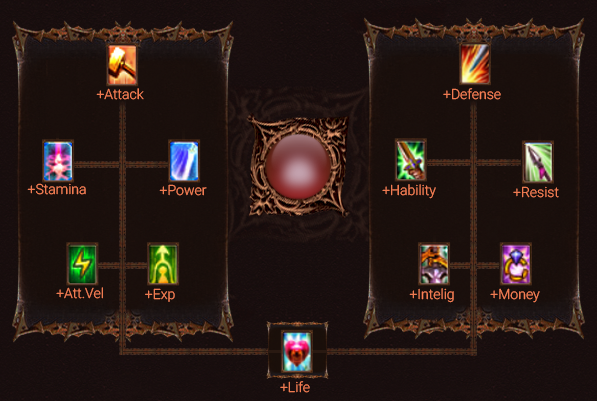
<style>
.page{position:relative;width:597px;height:401px}
.page>*{position:absolute;margin:0}
.t1{font:14px "Roboto-Light";color:#fa8055}
</style>
<div class="page">
<p class="t1" style="left:96px;top:88px;width:48px;height:12px">+Attack</p>
<p class="t1" style="left:443px;top:88px;width:58px;height:12px">+Defense</p>
<p class="t1" style="left:27px;top:183px;width:59px;height:12px">+Stamina</p>
<p class="t1" style="left:159px;top:184px;width:48px;height:12px">+Power</p>
<p class="t1" style="left:382px;top:184px;width:54px;height:15px">+Hability</p>
<p class="t1" style="left:513px;top:186px;width:46px;height:12px">+Resist</p>
<p class="t1" style="left:56px;top:287px;width:47px;height:12px">+Att.Vel</p>
<p class="t1" style="left:145px;top:288px;width:30px;height:14px">+Exp</p>
<p class="t1" style="left:409px;top:288px;width:45px;height:15px">+Intelig</p>
<p class="t1" style="left:490px;top:288px;width:50px;height:15px">+Money</p>
<p class="t1" style="left:280px;top:381px;width:30px;height:12px">+Life</p>
</div>
